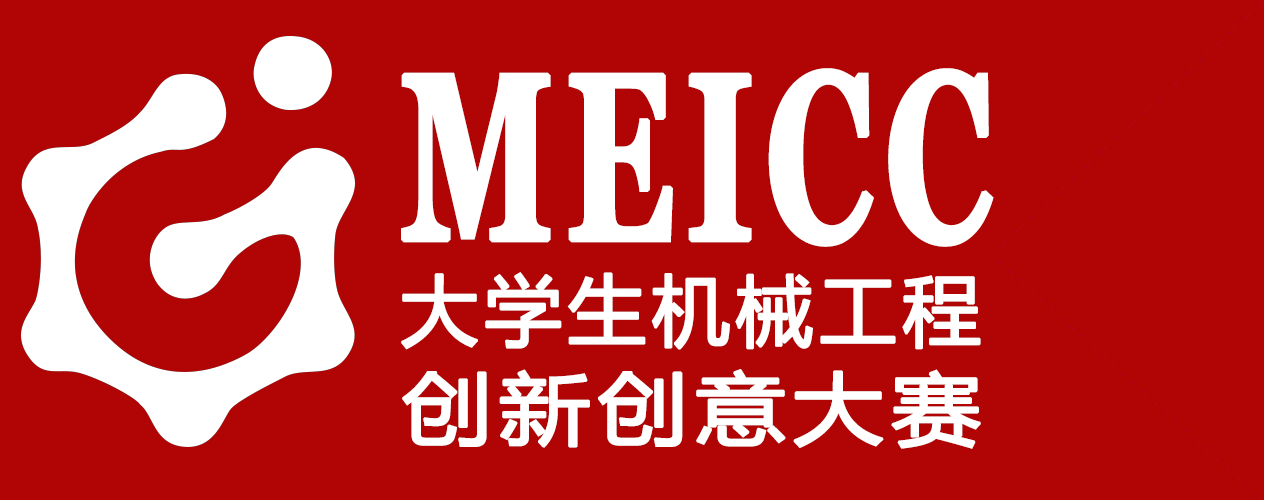
<style>
.page{position:relative;width:1264px;height:500px;background:#b10505}
.page>*{position:absolute;margin:0}
.t1{font:236.9px "Georgia-Bold";letter-spacing:0.06em;color:#ffffff;font-weight:bold;scale:0.63 1}
.t2{font:77px "MicrosoftYaHeiUI";letter-spacing:0.06em;color:#ffffff;font-weight:bold}
.t3{font:78.3px "MicrosoftYaHeiUI";letter-spacing:0.06em;color:#ffffff;font-weight:bold;scale:1.15 1}
</style>
<div class="page">
<p class="t1" style="left:401px;top:68px;width:593px;height:179px">MEICC</p>
<p class="t2" style="left:401px;top:272px;width:580px;height:78px">大学生机械工程</p>
<p class="t3" style="left:402px;top:369px;width:579px;height:80px">创新创意大赛</p>
</div>
